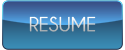
<style>
.page{position:relative;width:125px;height:50px}
.page>*{position:absolute;margin:0}
.t1{font:18px "CaviarDreams";text-transform:uppercase;font-weight:bold}
</style>
<div class="page">
<p class="t1" style="left:29px;top:16px;width:67px;height:16px">Resume</p>
</div>
